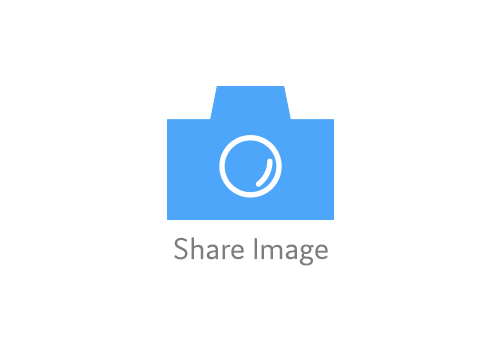
<style>
.page{position:relative;width:500px;height:350px;background:#ffffff}
.page>*{position:absolute;margin:0}
.t1{font:31.9px "Domus-Regular";color:#7d7d7d}
</style>
<div class="page">
<p class="t1" style="left:174px;top:237px;width:154px;height:29px">Share Image</p>
</div>
